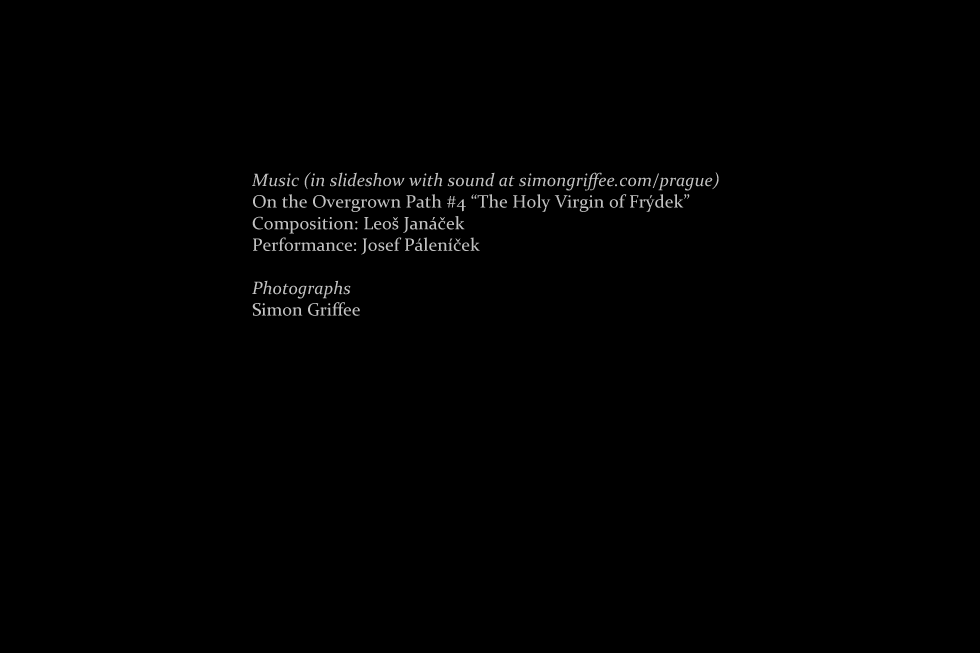
<style>
.page{position:relative;width:980px;height:653px;background:#000000}
.page>*{position:absolute;margin:0}
.t1{font:18px "Constantia";letter-spacing:0.005em;color:#c2c2c2}
.t2{font:18px "Constantia-Italic";letter-spacing:0.005em;color:#c2c2c2}
</style>
<div class="page">
<p class="t1" style="left:252px;top:172px;width:467px;height:144px"><span class="t2">Music (in slideshow with sound at simongriffee.com/prague)<br></span>On the Overgrown Path #4 “The Holy Virgin of Frýdek”  <br>Composition: Leoš Janáček<br>Performance: Josef Páleníček<br><br><span class="t2">Photographs<br></span>Simon Griffee</p>
</div>
